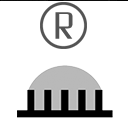
<style>
.page{position:relative;width:128px;height:128px;background:#ffffff}
.page>*{position:absolute;margin:0}
.t1{font:30px "TVpl";letter-spacing:0.05em;color:#545454}
</style>
<div class="page">
<p class="t1" style="left:55px;top:11px;width:18px;height:27px">R</p>
</div>
